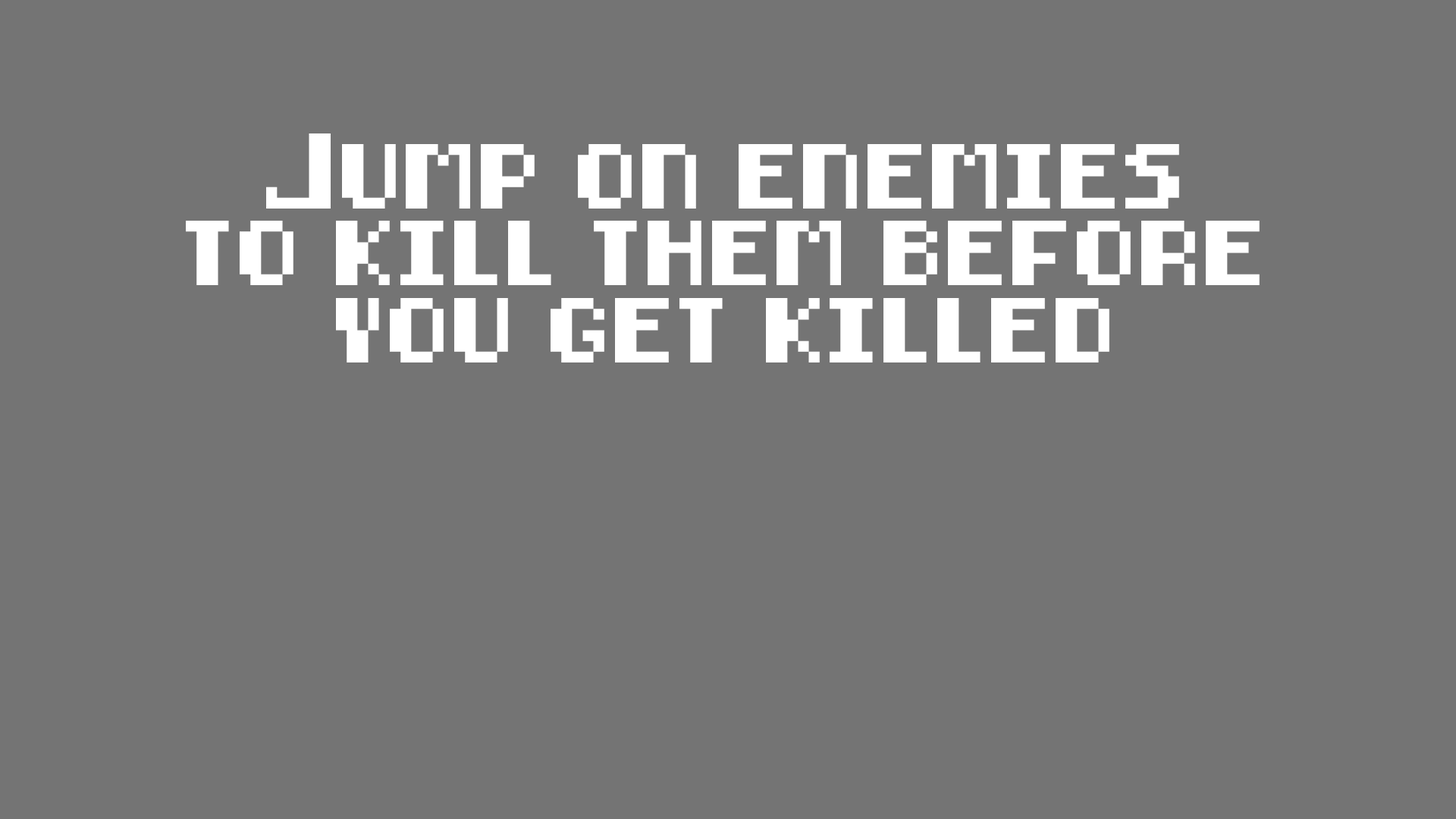
<style>
.page{position:relative;width:1456px;height:819px;background:#747474}
.page>*{position:absolute;margin:0}
.t1{font:64.4px "8-bit-pusab";color:#ffffff}
</style>
<div class="page">
<p class="t1" style="left:186px;top:133px;width:1074px;height:229px;text-align:center">Jump on enemies<br>to kill them before<br>you get killed</p>
</div>
